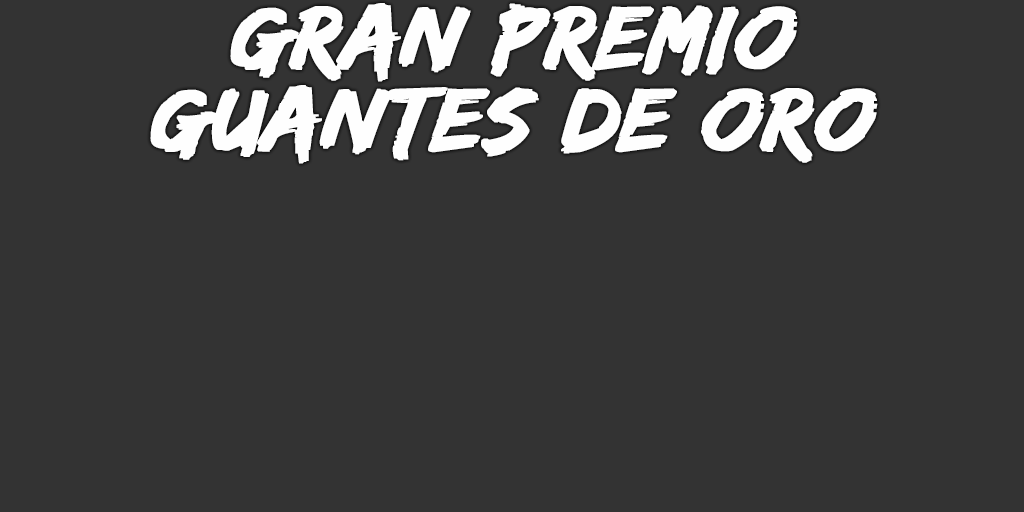
<style>
.page{position:relative;width:1024px;height:512px;background:#333333}
.page>*{position:absolute;margin:0}
.t1{font:93px/82px "EdoSZ";color:#fefefe;font-weight:bold;font-style:italic;scale:1.04 1}
</style>
<div class="page">
<p class="t1" style="left:150px;top:3px;width:728px;height:161px;text-align:center">gran premio<br>Guantes de Oro</p>
</div>
